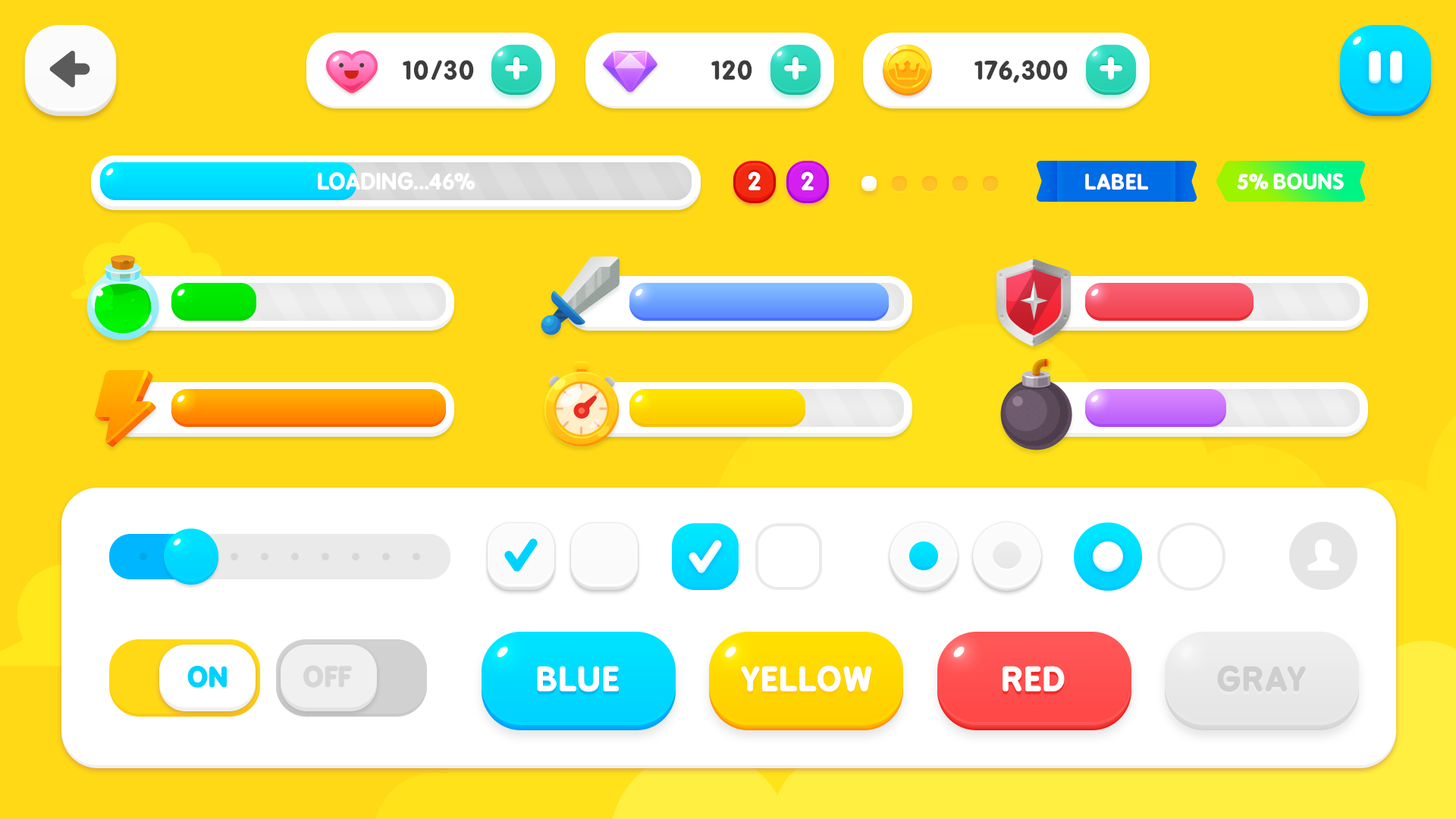
<style>
.page{position:relative;width:1456px;height:819px;background:#ffd916}
.page>*{position:absolute;margin:0}
.t1{font:25.2px "BPreplay-Bold";color:#3d3d3d;scale:1.05 1}
.t2{font:21.6px "BPreplay-Bold";color:#ffffff;text-transform:uppercase;scale:1.05 1}
.t3{font:23.8px "BPreplay-Bold";letter-spacing:-0.1em;color:#ffffff;scale:1.06 1}
.t4{font:20.2px "BPreplay-Bold";color:#ffffff;text-transform:uppercase;scale:1.05 1}
.t5{font:20.2px "BPreplay-Bold";letter-spacing:-0.025em;color:#ffffff;scale:1.05 1}
.t6{font:25.9px "BPreplay-Bold";color:#00d2ff;font-weight:bold;scale:1.05 1}
.t7{font:26.1px "BPreplay-Bold";color:#d6d6d6;font-weight:bold;scale:1.05 1}
.t8{font:31.7px "BPreplay-Bold";color:#ffffff;text-transform:uppercase;font-weight:bold;scale:1.05 1}
.t9{font:31.7px "BPreplay-Bold";color:#cecece;text-transform:uppercase;font-weight:bold;scale:1.05 1}
</style>
<div class="page">
<p class="t1" style="left:403px;top:60px;width:71px;height:20px">10/30</p>
<p class="t1" style="left:711px;top:60px;width:41px;height:20px">120</p>
<p class="t1" style="left:974px;top:60px;width:94px;height:23px">176,300</p>
<p class="t2" style="left:318px;top:172px;width:157px;height:18px">loading...46%</p>
<p class="t3" style="left:748px;top:171px;width:13px;height:19px">2</p>
<p class="t3" style="left:802px;top:171px;width:12px;height:19px">2</p>
<p class="t4" style="left:1085px;top:174px;width:63px;height:16px">LABEL</p>
<p class="t5" style="left:1237px;top:173px;width:107px;height:17px">5% BOUNS</p>
<p class="t6" style="left:187px;top:666px;width:40px;height:22px">ON</p>
<p class="t7" style="left:303px;top:665px;width:49px;height:23px">OFF</p>
<p class="t8" style="left:537px;top:666px;width:82px;height:26px">BLUE</p>
<p class="t8" style="left:741px;top:665px;width:131px;height:27px">Yellow</p>
<p class="t8" style="left:1003px;top:666px;width:62px;height:26px">RED</p>
<p class="t9" style="left:1217px;top:665px;width:89px;height:27px">GRAY</p>
</div>
